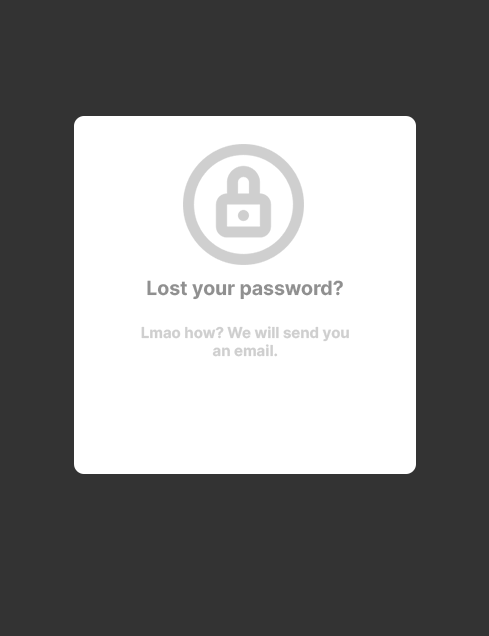
<style>
.page{position:relative;width:489px;height:636px;background:#333333}
.page>*{position:absolute;margin:0}
.t1{font:19.4px "Inter-Bold";color:#909090}
.t2{font:15px "Inter-Bold";color:#cfcfcf}
</style>
<div class="page">
<p class="t1" style="left:147px;top:280px;width:196px;height:20px">Lost your password?</p>
<p class="t2" style="left:141px;top:326px;width:208px;height:31px;text-align:center">Lmao how? We will send you<br>an email.</p>
</div>
